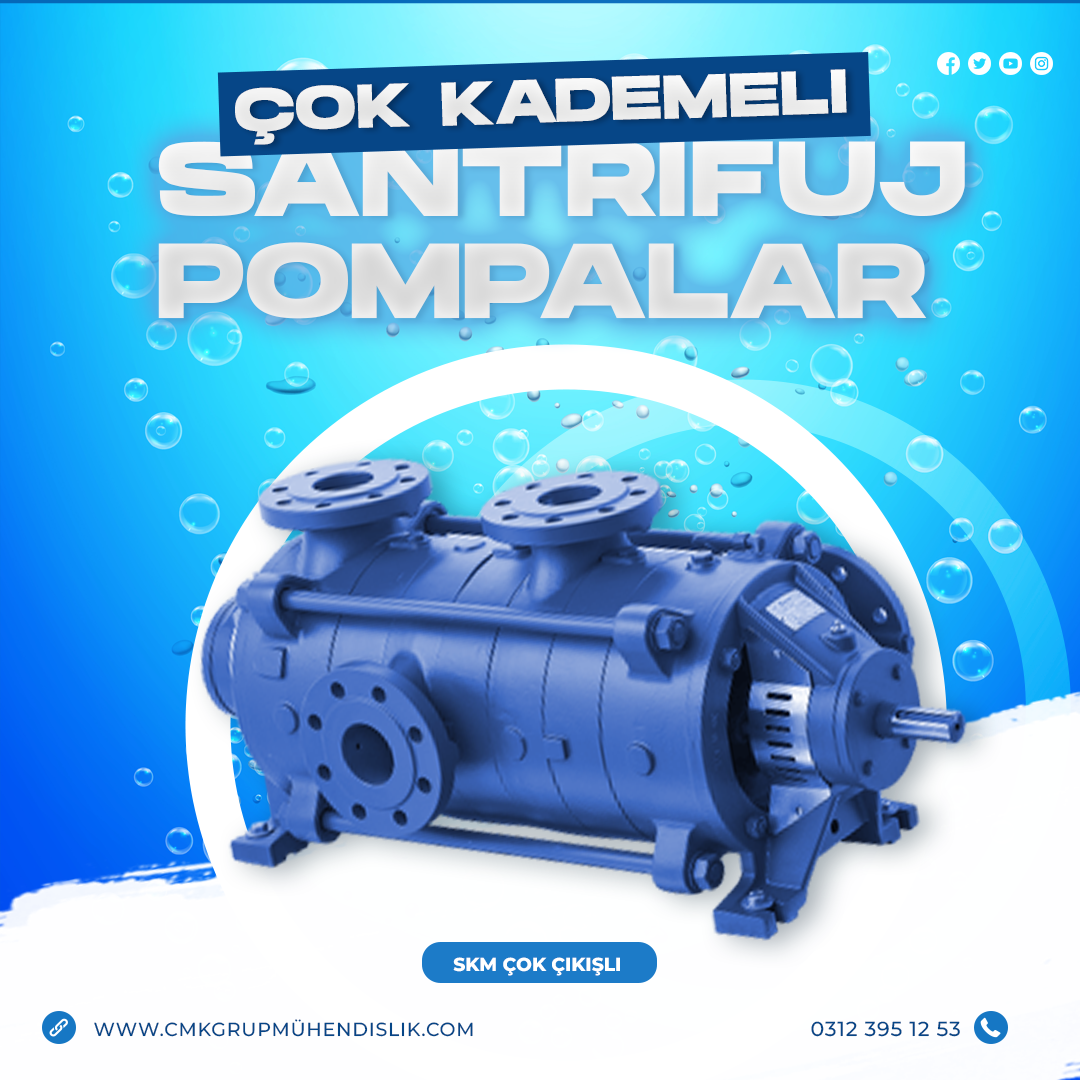
<style>
.page{position:relative;width:1080px;height:1080px}
.page>*{position:absolute;margin:0}
.t1{font:61.6px "HansonBold";color:#ffffff;text-transform:uppercase}
.t2{font:105.8px/102.2px "HansonBold";color:#e8e8e8;text-transform:uppercase}
.t3{font:18.7px "Montserrat-ExtraBold";color:#ffffff;text-transform:uppercase}
.t4{font:18.9px "Montserrat-Medium";letter-spacing:0.04em;color:#064687;text-transform:uppercase}
.t5{font:20.3px "Montserrat-Medium";letter-spacing:0.04em;color:#064687;text-transform:uppercase}
</style>
<div class="page">
<p class="t1" style="left:235px;top:69px;width:612px;height:76px;rotate:-2deg">Çok Kademeli</p>
<p class="t2" style="left:158px;top:117px;width:807px;height:202px">Santrifüj<br>Pompalar</p>
<p class="t3" style="left:453px;top:957px;width:167px;height:19px">SKM ÇOK ÇIKIŞLI</p>
<p class="t4" style="left:94px;top:1019px;width:379px;height:18px">www.cmkgrupmühendislik.com</p>
<p class="t5" style="left:811px;top:1021px;width:149px;height:16px">0312 395 12 53</p>
</div>
